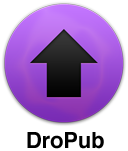
<style>
.page{position:relative;width:128px;height:151px;background:#ffffff}
.page>*{position:absolute;margin:0}
.t1{font:22px "Helvetica-Bold";color:#000000}
</style>
<div class="page">
<p class="t1" style="left:27px;top:132px;width:77px;height:17px">DroPub</p>
</div>
